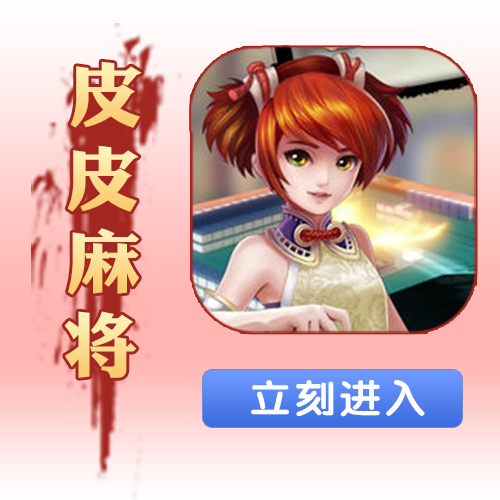
<style>
.page{position:relative;width:500px;height:500px}
.page>*{position:absolute;margin:0}
.t1{font:70px "DFPLiJinHeiW8";scale:1.08 1}
.t2{font:39.2px "FZY4JW--GB1-0";letter-spacing:0.06em;color:#ffffff;scale:1.08 1}
</style>
<div class="page">
<p class="t1" style="left:70px;top:61px;width:72px;height:67px">皮</p>
<p class="t1" style="left:67px;top:145px;width:72px;height:67px">皮</p>
<p class="t1" style="left:68px;top:228px;width:71px;height:67px">麻</p>
<p class="t1" style="left:64px;top:311px;width:73px;height:67px">将</p>
<p class="t2" style="left:251px;top:380px;width:174px;height:37px">立刻进入</p>
</div>
